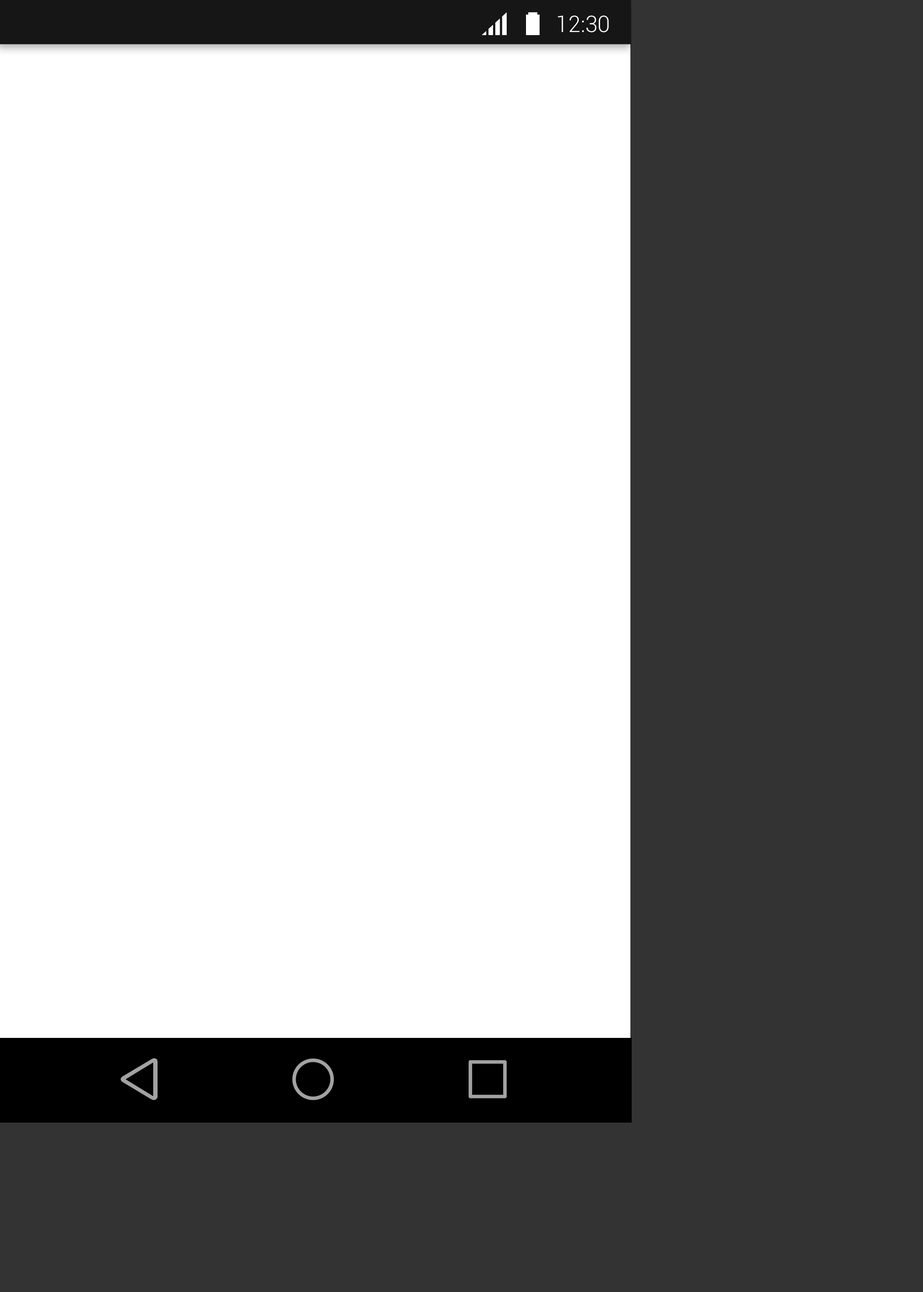
<style>
.page{position:relative;width:923px;height:1292px;background:#ffffff}
.page>*{position:absolute;margin:0}
.t1{font:22.2px "Roboto-Light";color:#ffffff}
</style>
<div class="page">
<p class="t1" style="left:558px;top:15px;width:51px;height:17px">12:30</p>
</div>
